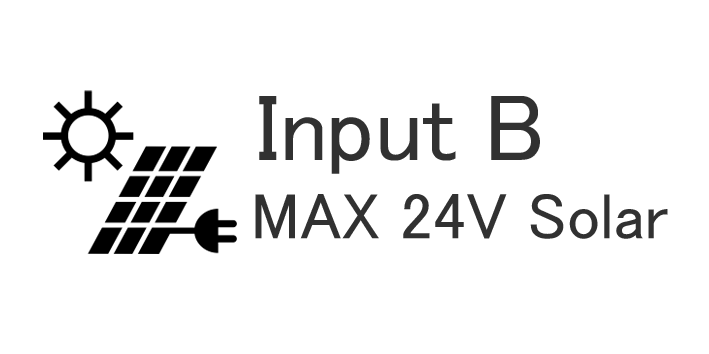
<style>
.page{position:relative;width:709px;height:354px;background:#ffffff}
.page>*{position:absolute;margin:0}
.t1{font:95.7px "MS-PGothic";color:#313131}
.t2{font:65.5px "MS-PGothic";color:#313131}
</style>
<div class="page">
<p class="t1" style="left:259px;top:96px;width:281px;height:78px">Input B</p>
<p class="t2" style="left:255px;top:194px;width:413px;height:45px">MAX 24V Solar</p>
</div>
